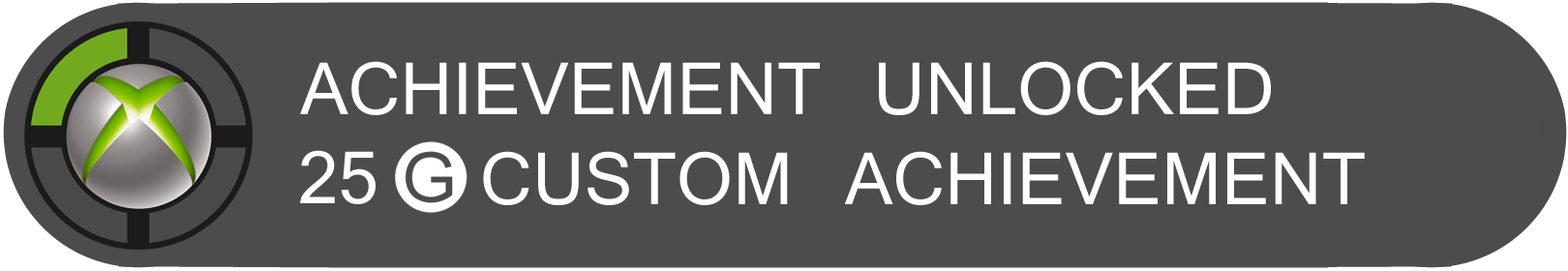
<style>
.page{position:relative;width:1568px;height:271px;background:#4c4c4c}
.page>*{position:absolute;margin:0}
.t1{font:69.7px "Kartika";color:#ffffff}
</style>
<div class="page">
<p class="t1" style="left:300px;top:61px;width:971px;height:54px">ACHIEVEMENT UNLOCKED</p>
<p class="t1" style="left:300px;top:150px;width:76px;height:54px">25</p>
<p class="t1" style="left:483px;top:151px;width:882px;height:54px">CUSTOM ACHIEVEMENT</p>
</div>
